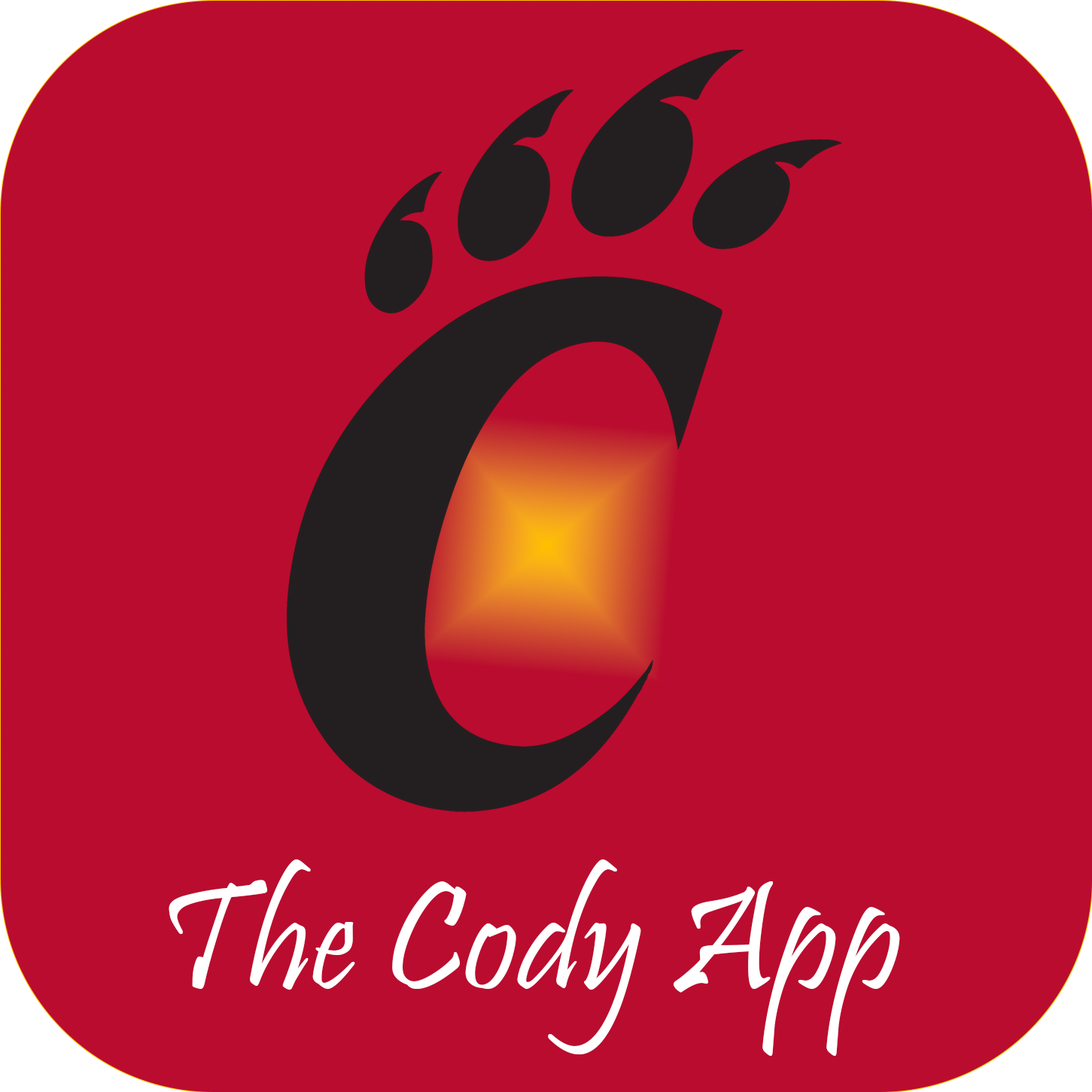
<style>
.page{position:relative;width:1092px;height:1092px;background:#ba0c2f}
.page>*{position:absolute;margin:0}
.t1{font:156.5px "Pristina-Regular";color:#ffffff}
</style>
<div class="page">
<p class="t1" style="left:169px;top:859px;width:731px;height:197px">The Cody App</p>
</div>
